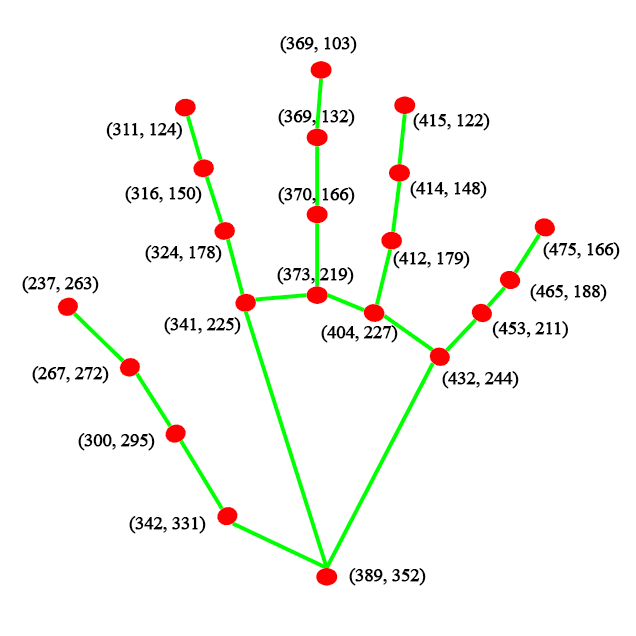
<style>
.page{position:relative;width:636px;height:636px;background:#ffffff}
.page>*{position:absolute;margin:0}
.t1{font:19px "TimesNewRomanPSMT";letter-spacing:-0.04em;color:#000000;font-weight:bold}
</style>
<div class="page">
<p class="t1" style="left:280px;top:36px;width:77px;height:18px">(369, 103)</p>
<p class="t1" style="left:278px;top:109px;width:77px;height:18px">(369, 132)</p>
<p class="t1" style="left:413px;top:113px;width:77px;height:18px">(415, 122)</p>
<p class="t1" style="left:106px;top:122px;width:77px;height:18px">(311, 124)</p>
<p class="t1" style="left:410px;top:181px;width:77px;height:18px">(414, 148)</p>
<p class="t1" style="left:125px;top:186px;width:77px;height:18px">(316, 150)</p>
<p class="t1" style="left:278px;top:187px;width:77px;height:18px">(370, 166)</p>
<p class="t1" style="left:145px;top:245px;width:77px;height:18px">(324, 178)</p>
<p class="t1" style="left:543px;top:242px;width:77px;height:18px">(475, 166)</p>
<p class="t1" style="left:393px;top:251px;width:77px;height:18px">(412, 179)</p>
<p class="t1" style="left:277px;top:267px;width:77px;height:18px">(373, 219)</p>
<p class="t1" style="left:22px;top:276px;width:77px;height:18px">(237, 263)</p>
<p class="t1" style="left:530px;top:284px;width:77px;height:18px">(465, 188)</p>
<p class="t1" style="left:164px;top:317px;width:77px;height:18px">(341, 225)</p>
<p class="t1" style="left:321px;top:325px;width:77px;height:18px">(404, 227)</p>
<p class="t1" style="left:492px;top:321px;width:77px;height:18px">(453, 211)</p>
<p class="t1" style="left:32px;top:366px;width:77px;height:18px">(267, 272)</p>
<p class="t1" style="left:442px;top:371px;width:77px;height:18px">(432, 244)</p>
<p class="t1" style="left:78px;top:433px;width:77px;height:18px">(300, 295)</p>
<p class="t1" style="left:129px;top:516px;width:77px;height:18px">(342, 331)</p>
<p class="t1" style="left:349px;top:568px;width:77px;height:18px">(389, 352)</p>
</div>
